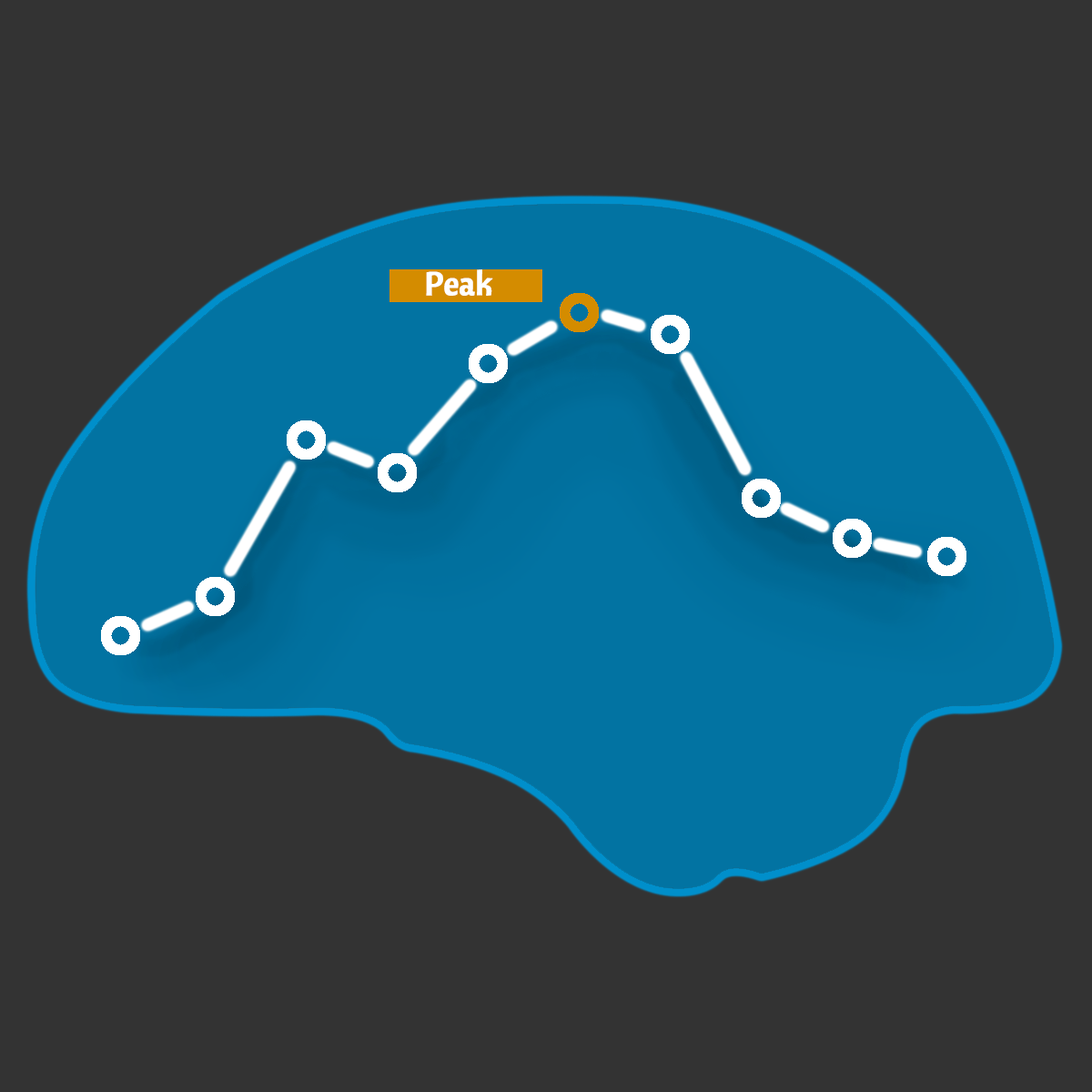
<style>
.page{position:relative;width:1092px;height:1092px;background:#333333}
.page>*{position:absolute;margin:0}
.t1{font:32.8px "CantoraOne-Regular";letter-spacing:-0.01em;color:#ffffff;font-weight:bold}
</style>
<div class="page">
<p class="t1" style="left:426px;top:269px;width:67px;height:27px">Peak</p>
</div>
